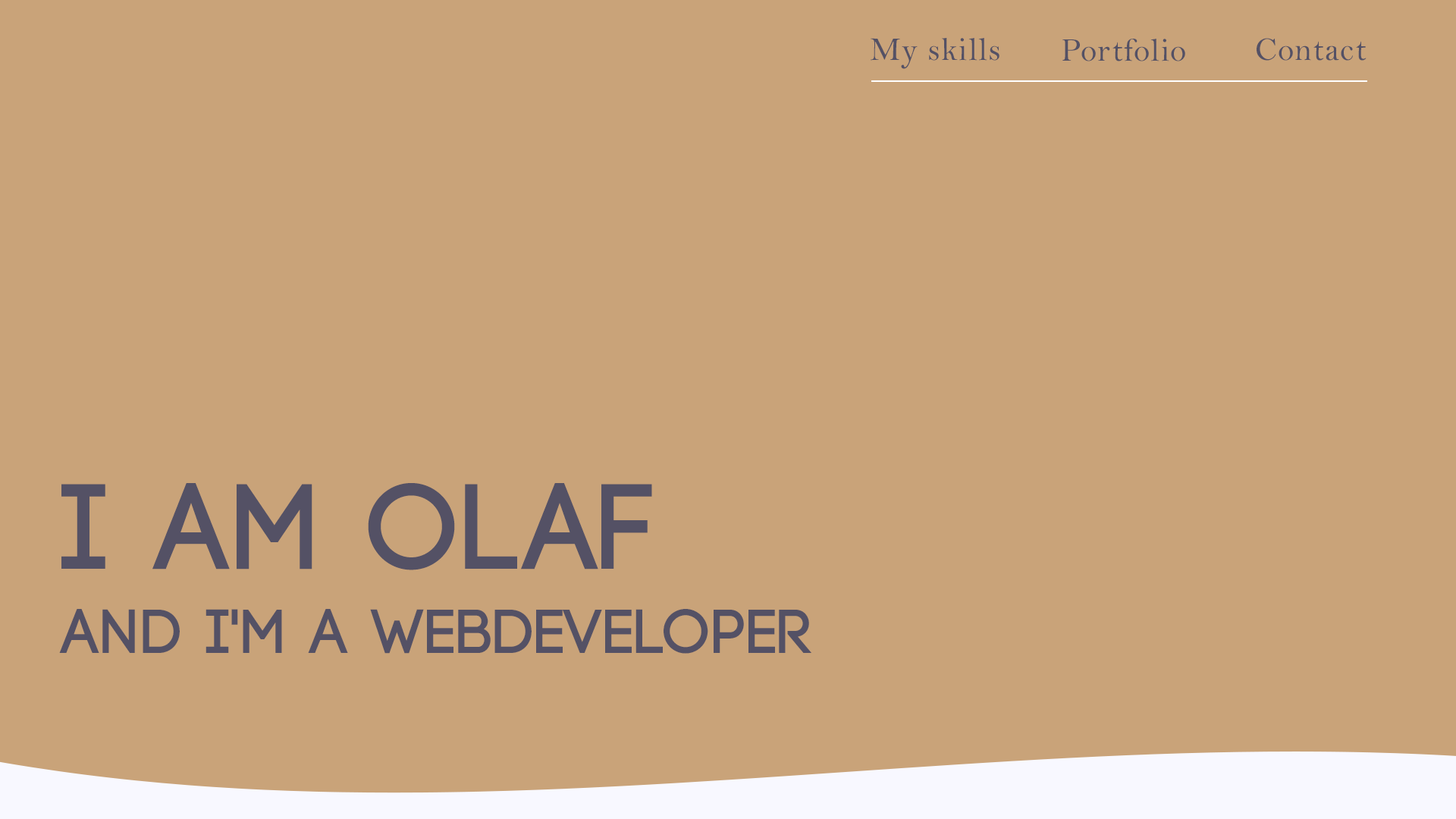
<style>
.page{position:relative;width:1456px;height:819px;background:#c9a379}
.page>*{position:absolute;margin:0}
.t1{font:33.1px "BellMT";letter-spacing:0.025em;color:#545165}
.t2{font:120.7px "Code-Bold";letter-spacing:0.025em;color:#545165}
.t3{font:62px "Code-Bold";letter-spacing:0.025em;color:#545165}
</style>
<div class="page">
<p class="t1" style="left:871px;top:38px;width:128px;height:31px">My skills</p>
<p class="t1" style="left:1062px;top:39px;width:123px;height:22px">Portfolio</p>
<p class="t1" style="left:1257px;top:38px;width:109px;height:23px">Contact</p>
<p class="t2" style="left:61px;top:483px;width:591px;height:87px">I am Olaf</p>
<p class="t3" style="left:59px;top:609px;width:752px;height:45px">and i'm a webdeveloper</p>
</div>
